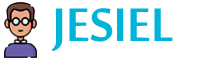
<style>
.page{position:relative;width:200px;height:60px;background:#ffffff}
.page>*{position:absolute;margin:0}
.t1{font:72px "MoolBoran";color:#00b4d9}
</style>
<div class="page">
<p class="t1" style="left:52px;top:8px;width:121px;height:44px">JESIEL</p>
</div>
